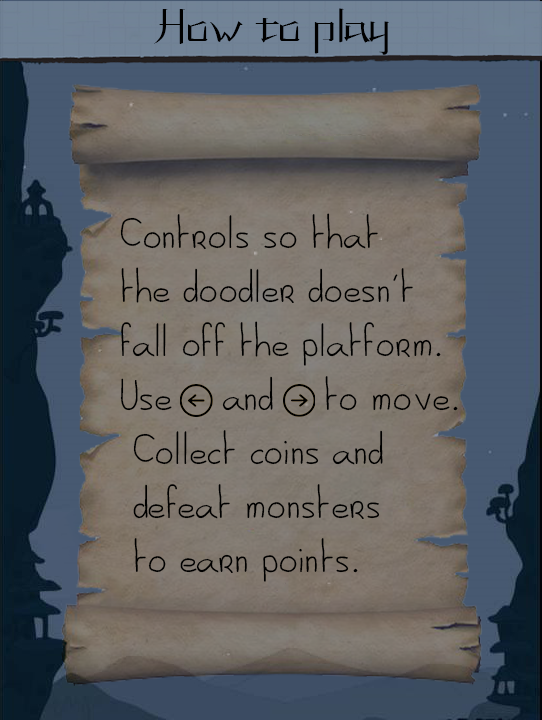
<style>
.page{position:relative;width:542px;height:720px}
.page>*{position:absolute;margin:0}
.t1{font:40px "KANEIWA-alp-regular";color:#000000}
.t2{font:45px "Al-seana";color:#000000}
</style>
<div class="page">
<p class="t1" style="left:154px;top:8px;width:235px;height:47px">How to play</p>
<p class="t2" style="left:120px;top:213px;width:338px;height:369px">Controls so that <br>the doodler doesn't <br>fall off the platform.<br>Use    and    to move. <br> Collect coins and <br> defeat monsters <br> to earn points.</p>
</div>
